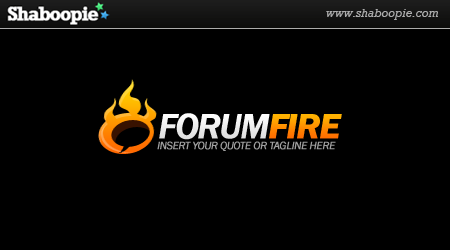
<style>
.page{position:relative;width:450px;height:250px;background:#000000}
.page>*{position:absolute;margin:0}
.t1{font:36px "FranklinGothic-MediumItalic";letter-spacing:-0.05em;color:#f1f1f1;font-weight:bold}
.t2{font:36px "FranklinGothic-DemiItalic";letter-spacing:-0.05em;font-weight:bold}
.t3{font:11px "FranklinGothic-BookItalic";letter-spacing:-0.05em;color:#9f9f9f;font-weight:bold}
</style>
<div class="page">
<p class="t1" style="left:159px;top:113px;width:111px;height:27px">FORUM</p>
<p class="t2" style="left:269px;top:114px;width:73px;height:25px">FIRE</p>
<p class="t3" style="left:157px;top:141px;width:179px;height:10px">INSERT YOUR QUOTE OR TAGLINE HERE</p>
</div>
